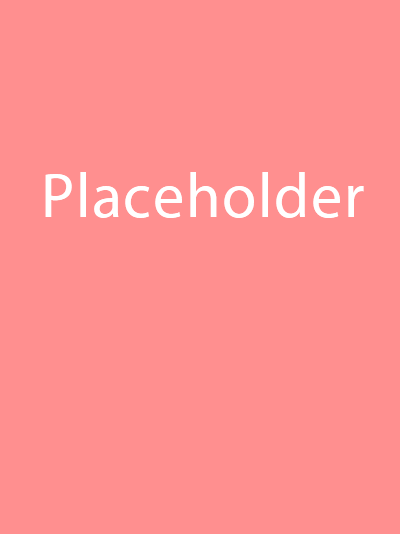
<style>
.page{position:relative;width:400px;height:534px;background:#ff8f8f}
.page>*{position:absolute;margin:0}
.t1{font:62.5px "MyriadPro-Regular";letter-spacing:0.025em;color:#ffffff}
</style>
<div class="page">
<p class="t1" style="left:45px;top:172px;width:319px;height:46px">Placeholder</p>
</div>
